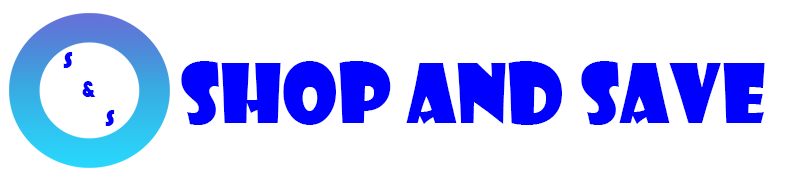
<style>
.page{position:relative;width:787px;height:177px;background:#ffffff}
.page>*{position:absolute;margin:0}
.t1{font:24px "Bauhaus93";color:#0000ff}
.t2{font:80px "ShowcardGothic-Reg";color:#0000ff}
</style>
<div class="page">
<p class="t1" style="left:63px;top:52px;width:52px;height:74px;text-align:center">S<br>       &amp;<br>              S</p>
<p class="t2" style="left:181px;top:61px;width:584px;height:64px">Shop and Save</p>
</div>
